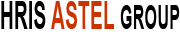
<style>
.page{position:relative;width:180px;height:40px;background:#ffffff}
.page>*{position:absolute;margin:0}
.t1{font:39.3px "Arial-BoldMT";color:#cc3300;scale:0.49 1}
.t2{font:39.3px "Arial-BoldMT";color:#000000;scale:0.49 1}
.t3{font:33.3px "Arial-BoldMT";color:#000000;scale:0.49 1}
</style>
<div class="page">
<p class="t1" style="left:1px;top:1px;width:179px;height:28px"><span class="t2">HRIS </span>ASTEL <span class="t3">GROUP</span></p>
</div>
